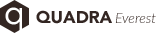
<style>
.page{position:relative;width:156px;height:33px;background:#ffffff}
.page>*{position:absolute;margin:0}
.t1{font:17px "Avenir-Black";color:#332622;text-transform:uppercase}
.t2{font:14px "Lato-LightItalic"}
</style>
<div class="page">
<p class="t1" style="left:36px;top:10px;width:76px;height:14px">Quadra</p>
<p class="t2" style="left:115px;top:13px;width:41px;height:10px">Everest</p>
</div>
